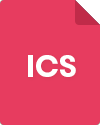
<style>
.page{position:relative;width:100px;height:125px;background:#e73c5f}
.page>*{position:absolute;margin:0}
.t1{font:30px "GTWalsheimBold";color:#ffffff}
</style>
<div class="page">
<p class="t1" style="left:28px;top:55px;width:48px;height:22px">ICS</p>
</div>
